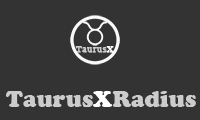
<style>
.page{position:relative;width:200px;height:120px;background:#333333}
.page>*{position:absolute;margin:0}
.t1{font:24px "CooperBlack";color:#cccccc}
.t2{font:24px "CooperBlack";color:#ffffff}
</style>
<div class="page">
<p class="t1" style="left:6px;top:91px;width:190px;height:16px">Taurus<span class="t2">X</span>Radius</p>
</div>
